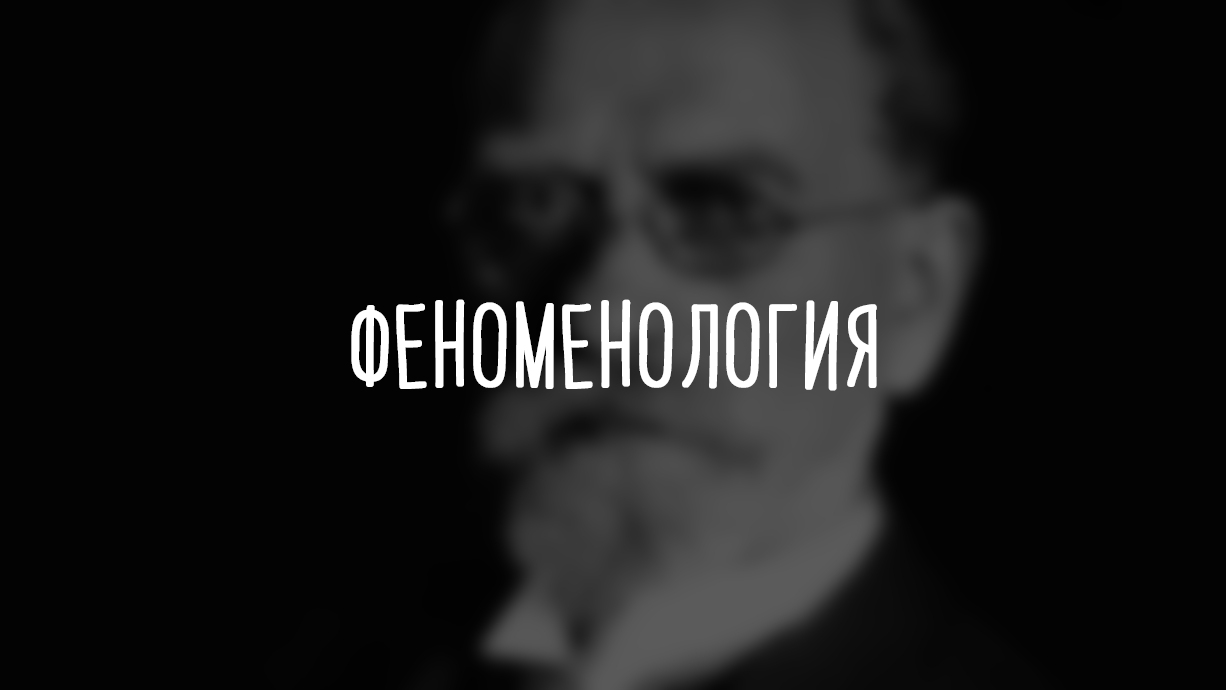
<style>
.page{position:relative;width:1226px;height:690px;background:#030303}
.page>*{position:absolute;margin:0}
.t1{font:72px "PapayaSunrise";color:#ffffff;font-weight:bold}
</style>
<div class="page">
<p class="t1" style="left:351px;top:299px;width:526px;height:92px">феноменология</p>
</div>
